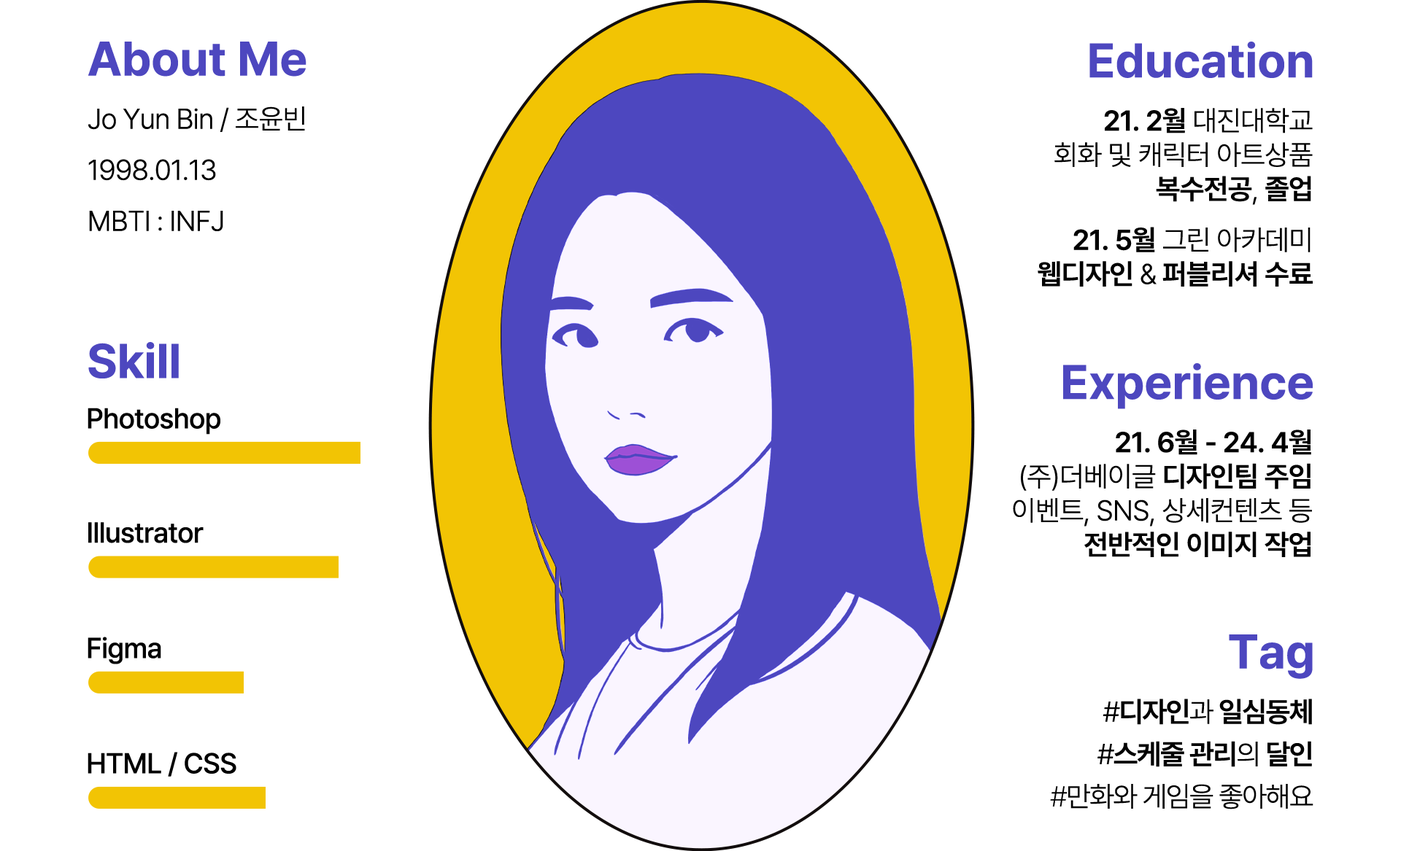
<style>
.page{position:relative;width:1401px;height:851px;background:#ffffff}
.page>*{position:absolute;margin:0}
.t1{font:48.1px "Pretendard-Bold";color:#4d47bf}
.t2{font:28.5px/51.1px "Pretendard-Light";letter-spacing:-0.02em;color:#000000}
.t3{font:28.5px "Pretendard-Light";letter-spacing:-0.02em;color:#000000}
.t4{font:28.5px "Pretendard-SemiBold";letter-spacing:-0.02em;color:#000000}
.t5{font:28.5px/51px "Pretendard-SemiBold";letter-spacing:-0.02em;color:#000000}
.t6{font:28.5px/51px "Pretendard-Light";letter-spacing:-0.02em;color:#000000}
.t7{font:48.2px "Pretendard-Bold";color:#4d47bf}
.t8{font:28.5px "Pretendard-Medium";letter-spacing:-0.02em;color:#000000}
.t9{font:28.5px/42.4px "Pretendard-Light";letter-spacing:-0.04em;color:#000000}
.t10{font:28.5px/42.4px "Pretendard-SemiBold";letter-spacing:-0.04em;color:#000000}
.t11{font:28.5px/42.4px "Pretendard-ExtraLight";letter-spacing:-0.04em;color:#000000}
</style>
<div class="page">
<p class="t1" style="left:88px;top:42px;width:218px;height:35px">About Me</p>
<p class="t1" style="left:1089px;top:42px;width:223px;height:36px">Education</p>
<p class="t2" style="left:88px;top:107px;width:217px;height:124px">Jo Yun Bin / 조윤빈<br>1998.01.13<br>MBTI : INFJ</p>
<p class="t3" style="left:1037px;top:108px;width:275px;height:179px;text-align:right"><span class="t4">21. 2월</span> 대진대학교<br>회화 및 캐릭터 아트상품<br><span class="t4">복수전공</span>, <span class="t4">졸업<br></span><span class="t5">21. 5월</span><span class="t6"> 그린 아카데미<br></span><span class="t4">웹디자인</span> &amp; <span class="t4">퍼블리셔 수료</span></p>
<p class="t7" style="left:88px;top:342px;width:91px;height:37px">Skill</p>
<p class="t1" style="left:1063px;top:363px;width:249px;height:46px">Experience</p>
<p class="t8" style="left:88px;top:408px;width:132px;height:27px">Photoshop</p>
<p class="t3" style="left:1013px;top:430px;width:299px;height:127px;text-align:right"><span class="t4">21. 6월 - 24. 4월</span><br>(주)더베이글 <span class="t4">디자인팀 주임<br></span>이벤트, SNS, 상세컨텐츠 등<br><span class="t4">전반적인 이미지 작업</span></p>
<p class="t8" style="left:88px;top:522px;width:116px;height:21px">Illustrator</p>
<p class="t8" style="left:88px;top:637px;width:73px;height:28px">Figma</p>
<p class="t7" style="left:1228px;top:635px;width:84px;height:44px">Tag</p>
<p class="t9" style="left:1050px;top:699px;width:263px;height:111px;text-align:right">#<span class="t10">디자인</span>과 <span class="t10">일심동체<br></span>#<span class="t10">스케줄 관리</span>의 <span class="t10">달인<br></span><span class="t11">#</span>만화와 게임을 좋아해요</p>
<p class="t8" style="left:88px;top:752px;width:148px;height:25px">HTML / CSS</p>
</div>
